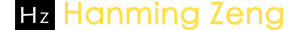
<style>
.page{position:relative;width:300px;height:30px;background:#ffffff}
.page>*{position:absolute;margin:0}
.t1{font:30px "STHeitiTC-Medium";color:#ffdf4a;font-weight:bold}
</style>
<div class="page">
<p class="t1" style="left:65px;top:1px;width:219px;height:29px">Hanming Zeng</p>
</div>
